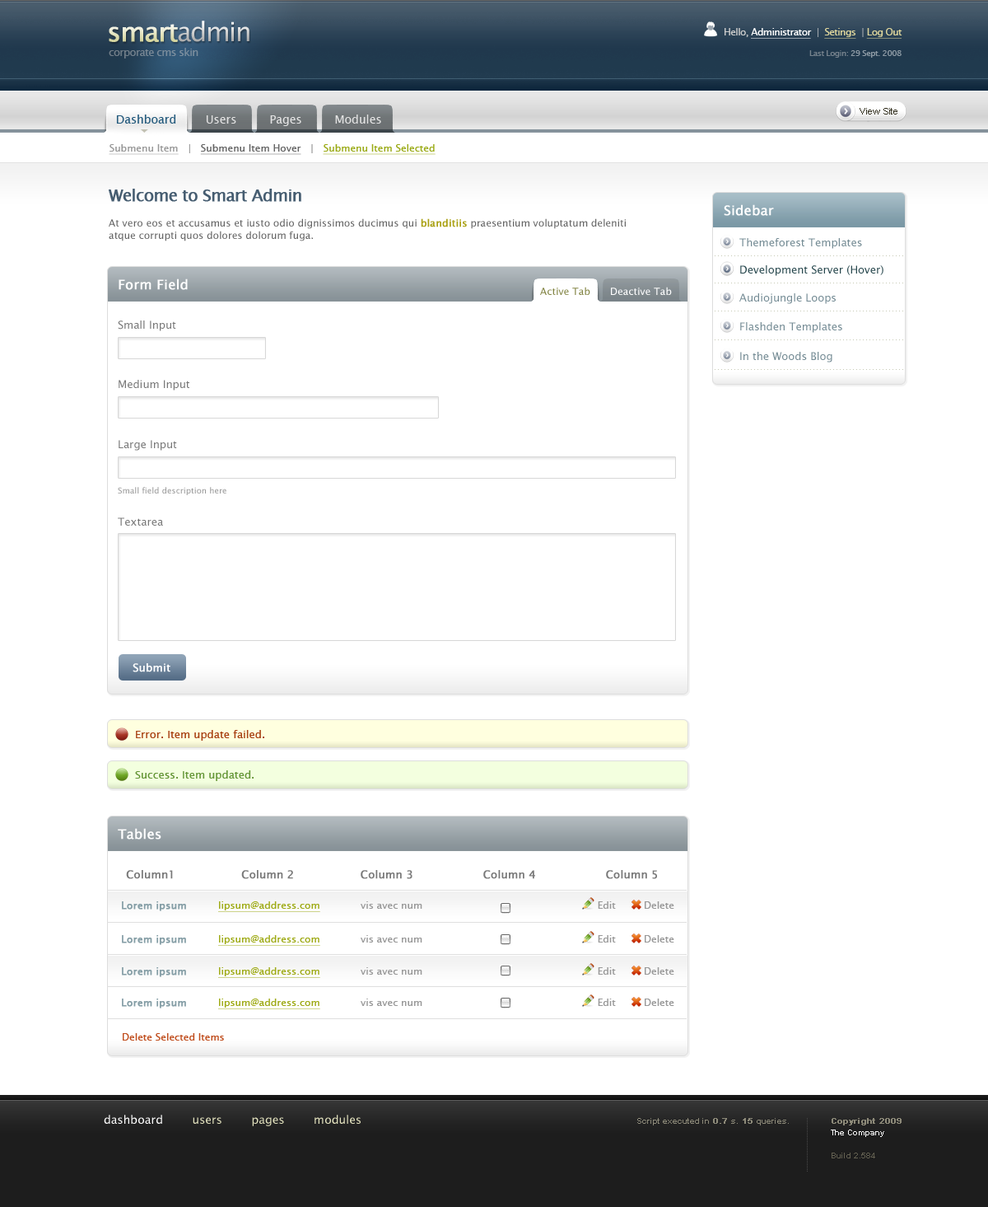
<style>
.page{position:relative;width:988px;height:1207px;background:#ffffff}
.page>*{position:absolute;margin:0}
.t1{font:26.4px "LucidaSans";letter-spacing:-0.05em;color:#e9e9cd;font-weight:bold}
.t2{font:26.4px "LucidaSans";letter-spacing:-0.05em;color:#d4d4d4}
.t3{font:9.9px "LucidaSansUnicode";letter-spacing:-0.05em;color:#ffffff;text-decoration:underline}
.t4{font:9.9px "LucidaSansUnicode";letter-spacing:-0.05em;color:#cccccc}
.t5{font:9.9px "LucidaSansUnicode";letter-spacing:-0.05em;color:#dfd69c;text-decoration:underline}
.t6{font:10.7px "LucidaSansUnicode";letter-spacing:-0.05em;color:#778795}
.t7{font:8.2px "LucidaSansUnicode";letter-spacing:-0.05em}
.t8{font:9.1px "ArialMT";color:#33301f}
.t9{font:9.9px "LucidaSansUnicode";color:#9bab17;text-decoration:underline}
.t10{font:9.9px "LucidaSansUnicode";color:#999999;text-decoration:underline}
.t11{font:9.9px "LucidaSansUnicode";color:#666666}
.t12{font:9.9px "LucidaSansUnicode";color:#666666;text-decoration:underline}
.t13{font:16.5px "LucidaSansUnicode";letter-spacing:-0.05em;color:#465d71;font-weight:bold}
.t14{font:13.2px "LucidaSansUnicode";color:#ffffff;font-weight:bold}
.t15{font:9.9px/12.4px "LucidaSansUnicode";color:#666666}
.t16{font:9.9px/12.4px "LucidaSansUnicode";color:#aba217;font-weight:bold}
.t17{font:10.7px "LucidaSansUnicode";color:#748b94}
.t18{font:10.7px "LucidaSansUnicode";color:#29494f}
.t19{font:9.9px "LucidaSansUnicode";color:#848646}
.t20{font:9.9px "LucidaSansUnicode";color:#ffffff}
.t21{font:10.7px "LucidaSansUnicode";color:#787878}
.t22{font:8.2px "LucidaSansUnicode";color:#999999}
.t23{font:10.7px "LucidaSansUnicode";color:#ffffff;font-weight:bold}
.t24{font:10.7px "LucidaSansUnicode";color:#a84114}
.t25{font:10.7px "LucidaSansUnicode";color:#669638}
.t26{font:10.7px "LucidaSansUnicode";color:#787878;font-weight:bold}
.t27{font:9.9px "LucidaSansUnicode";color:#999999}
.t28{font:9.9px "LucidaSansUnicode";color:#859ea6;font-weight:bold}
.t29{font:9.9px "LucidaSansUnicode";color:#9fab17;text-decoration:underline}
.t30{font:9.9px "LucidaSansUnicode";color:#c04e1e}
.t31{font:11.5px "LucidaSansUnicode";color:#e4e3bf}
.t32{font:11.5px "LucidaSansUnicode";color:#ffffff}
.t33{font:8.2px "Arial-BoldMT";color:#8d8a79}
.t34{font:8.2px "Arial-BoldMT";color:#8d8a79;font-weight:bold}
.t35{font:8.2px/11.5px "Arial-BoldMT";color:#8d8a79;font-weight:bold}
.t36{font:8.2px/11.5px "Arial-BoldMT";color:#ffffff}
.t37{font:8.2px/11.5px "Arial-BoldMT";color:#636051}
</style>
<div class="page">
<p class="t1" style="left:109px;top:21px;width:141px;height:21px">smart <span class="t2">admin</span></p>
<p class="t3" style="left:725px;top:28px;width:178px;height:11px"><span class="t4">Hello, </span>Administrator<span class="t4">  |  </span><span class="t5">Setings</span><span class="t4">  | </span><span class="t5">Log Out</span></p>
<p class="t6" style="left:109px;top:48px;width:89px;height:10px">corporate cms skin</p>
<p class="t7" style="left:810px;top:50px;width:92px;height:8px">Last Login: 29 Sept. 2008</p>
<p class="t8" style="left:860px;top:108px;width:38px;height:6px">View Site</p>
<p class="t9" style="left:109px;top:144px;width:327px;height:11px"><span class="t10">Submenu Item</span><span class="t11">   |   </span><span class="t12">Submenu Item Hover</span><span class="t11">   |   </span>Submenu Item Selected</p>
<p class="t13" style="left:109px;top:189px;width:192px;height:13px">Welcome to Smart Admin</p>
<p class="t14" style="left:724px;top:204px;width:50px;height:12px">Sidebar</p>
<p class="t15" style="left:109px;top:218px;width:517px;height:23px">At vero eos et accusamus et iusto odio dignissimos ducimus qui <span class="t16">blanditiis</span> praesentium voluptatum deleniti atque corrupti quos dolores dolorum fuga.</p>
<p class="t17" style="left:740px;top:238px;width:122px;height:11px">Themeforest Templates</p>
<p class="t18" style="left:740px;top:265px;width:144px;height:11px">Development Server (Hover)</p>
<p class="t14" style="left:119px;top:278px;width:69px;height:12px">Form Field</p>
<p class="t19" style="left:540px;top:287px;width:51px;height:8px">Active Tab</p>
<p class="t20" style="left:611px;top:287px;width:61px;height:8px">Deactive Tab</p>
<p class="t17" style="left:740px;top:293px;width:96px;height:11px">Audiojungle Loops</p>
<p class="t21" style="left:118px;top:320px;width:58px;height:11px">Small Input</p>
<p class="t17" style="left:740px;top:322px;width:103px;height:11px">Flashden Templates</p>
<p class="t17" style="left:740px;top:352px;width:93px;height:10px">In the Woods Blog</p>
<p class="t21" style="left:119px;top:380px;width:70px;height:10px">Medium Input</p>
<p class="t21" style="left:119px;top:440px;width:58px;height:11px">Large Input</p>
<p class="t22" style="left:118px;top:487px;width:108px;height:8px">Small field description here</p>
<p class="t21" style="left:118px;top:517px;width:45px;height:8px">Textarea</p>
<p class="t23" style="left:133px;top:663px;width:37px;height:9px">Submit</p>
<p class="t24" style="left:136px;top:730px;width:128px;height:10px">Error. Item update failed.</p>
<p class="t25" style="left:135px;top:770px;width:119px;height:11px">Success. Item updated.</p>
<p class="t14" style="left:118px;top:828px;width:43px;height:11px">Tables</p>
<p class="t26" style="left:126px;top:870px;width:531px;height:9px">Column1                  Column 2                  Column 3                   Column 4                   Column 5</p>
<p class="t27" style="left:122px;top:901px;width:553px;height:11px"><span class="t28">Lorem ipsum          </span><span class="t29">lipsum@address.com</span>             vis avec num                                                        Edit         Delete</p>
<p class="t27" style="left:122px;top:935px;width:553px;height:10px"><span class="t28">Lorem ipsum          </span><span class="t29">lipsum@address.com</span>             vis avec num                                                        Edit         Delete</p>
<p class="t27" style="left:122px;top:967px;width:553px;height:11px"><span class="t28">Lorem ipsum          </span><span class="t29">lipsum@address.com</span>             vis avec num                                                        Edit         Delete</p>
<p class="t27" style="left:122px;top:998px;width:553px;height:11px"><span class="t28">Lorem ipsum          </span><span class="t29">lipsum@address.com</span>             vis avec num                                                        Edit         Delete</p>
<p class="t30" style="left:123px;top:1033px;width:101px;height:7px">Delete Selected Items</p>
<p class="t31" style="left:104px;top:1114px;width:257px;height:12px"><span class="t32">dashboard </span>       users        pages        modules</p>
<p class="t33" style="left:637px;top:1118px;width:152px;height:7px">Script executed in<span class="t34"> 0.7 </span>s.<span class="t34"> 15 </span>queries.</p>
<p class="t35" style="left:831px;top:1118px;width:71px;height:40px">Copyright 2009   <br><span class="t36">The Company<br></span><span class="t37"><br>Build 2.584</span></p>
</div>
